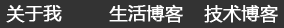
<style>
.page{position:relative;width:284px;height:28px;background:#333333}
.page>*{position:absolute;margin:0}
.t1{font:18px "MicrosoftYaHei";color:#ffffff;font-weight:bold}
</style>
<div class="page">
<p class="t1" style="left:6px;top:5px;width:56px;height:18px">关于我</p>
<p class="t1" style="left:109px;top:4px;width:74px;height:19px">生活博客</p>
<p class="t1" style="left:204px;top:4px;width:74px;height:19px">技术博客</p>
</div>
